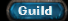
<style>
.page{position:relative;width:68px;height:21px}
.page>*{position:absolute;margin:0}
.t1{font:12.8px "BritannicBold";scale:1.19 1}
</style>
<div class="page">
<p class="t1" style="left:18px;top:6px;width:34px;height:9px">Guild</p>
</div>
